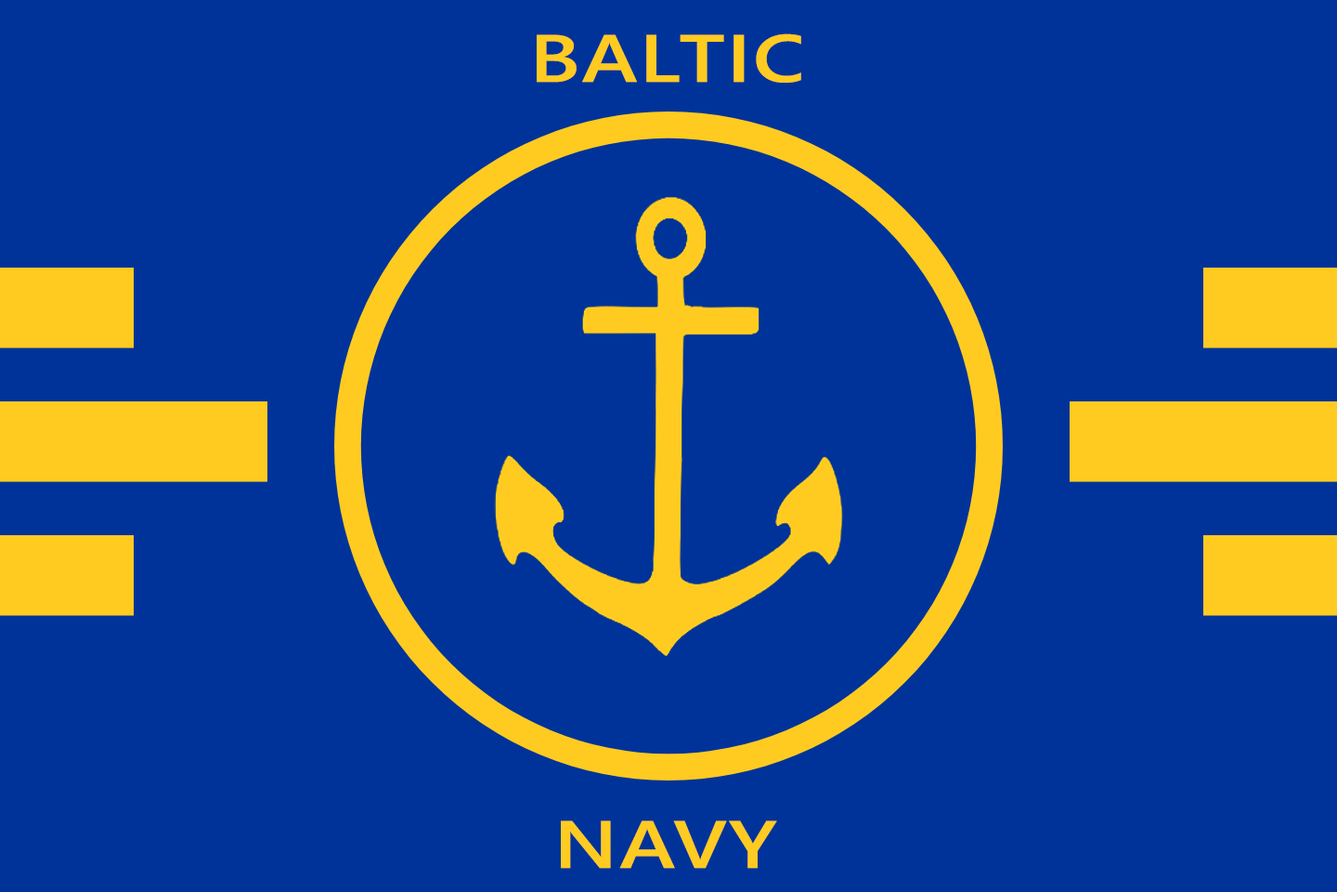
<style>
.page{position:relative;width:1337px;height:892px;background:#003399}
.page>*{position:absolute;margin:0}
.t1{font:66.9px "YuGothicUI-Bold";letter-spacing:0.02em;color:#ffcb21;scale:1.25 1}
</style>
<div class="page">
<p class="t1" style="left:537px;top:33px;width:265px;height:50px">BALTIC</p>
<p class="t1" style="left:561px;top:820px;width:216px;height:48px">NAVY</p>
</div>
